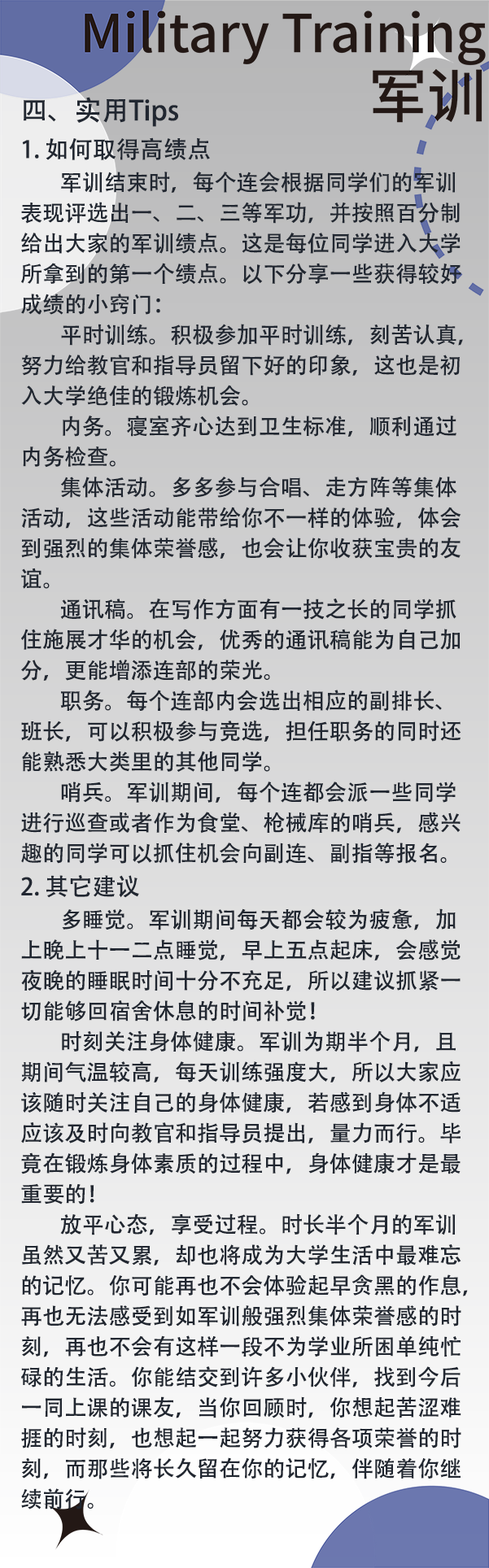
<style>
.page{position:relative;width:489px;height:1568px}
.page>*{position:absolute;margin:0}
.t1{font:22px/30.5px "AdobeHeitiStd-Regular";color:#212731}
.t2{font:27.1px/40.7px "AdobeHeitiStd-Regular";color:#212731}
.t3{font:23.7px/33.9px "AdobeHeitiStd-Regular";color:#212731}
</style>
<div class="page">
<p class="t1" style="left:21px;top:97px;width:447px;height:1412px"><span class="t2">四、实用Tips<br></span><span class="t3">1. 如何取得高绩点<br></span>        军训结束时，每个连会根据同学们的军训<br>表现评选出一、二、三等军功，并按照百分制<br>给出大家的军训绩点。这是每位同学进入大学<br>所拿到的第一个绩点。以下分享一些获得较好<br>成绩的小窍门：<br>        平时训练。积极参加平时训练，刻苦认真，<br>努力给教官和指导员留下好的印象，这也是初<br>入大学绝佳的锻炼机会。 <br>        内务。寝室齐心达到卫生标准，顺利通过<br>内务检查。<br>        集体活动。多多参与合唱、走方阵等集体<br>活动，这些活动能带给你不一样的体验，体会<br>到强烈的集体荣誉感，也会让你收获宝贵的友<br>谊。<br>        通讯稿。在写作方面有一技之长的同学抓<br>住施展才华的机会，优秀的通讯稿能为自己加<br>分，更能增添连部的荣光。<br>        职务。每个连部内会选出相应的副排长、<br>班长，可以积极参与竞选，担任职务的同时还<br>能熟悉大类里的其他同学。<br>        哨兵。军训期间，每个连都会派一些同学<br>进行巡查或者作为食堂、枪械库的哨兵，感兴<br>趣的同学可以抓住机会向副连、副指等报名。<br><span class="t3">2. 其它建议<br></span>        多睡觉。军训期间每天都会较为疲惫，加<br>上晚上十一二点睡觉，早上五点起床，会感觉<br>夜晚的睡眠时间十分不充足，所以建议抓紧一<br>切能够回宿舍休息的时间补觉！<br>        时刻关注身体健康。军训为期半个月，且<br>期间气温较高，每天训练强度大，所以大家应<br>该随时关注自己的身体健康，若感到身体不适<br>应该及时向教官和指导员提出，量力而行。毕<br>竟在锻炼身体素质的过程中，身体健康才是最<br>重要的！<br>        放平心态，享受过程。时长半个月的军训<br>虽然又苦又累，却也将成为大学生活中最难忘<br>的记忆。你可能再也不会体验起早贪黑的作息，<br>再也无法感受到如军训般强烈集体荣誉感的时<br>刻，再也不会有这样一段不为学业所困单纯忙<br>碌的生活。你能结交到许多小伙伴，找到今后<br>一同上课的课友，当你回顾时，你想起苦涩难<br>捱的时刻，也想起一起努力获得各项荣誉的时<br>刻，而那些将长久留在你的记忆，伴随着你继<br>续前行。</p>
</div>
